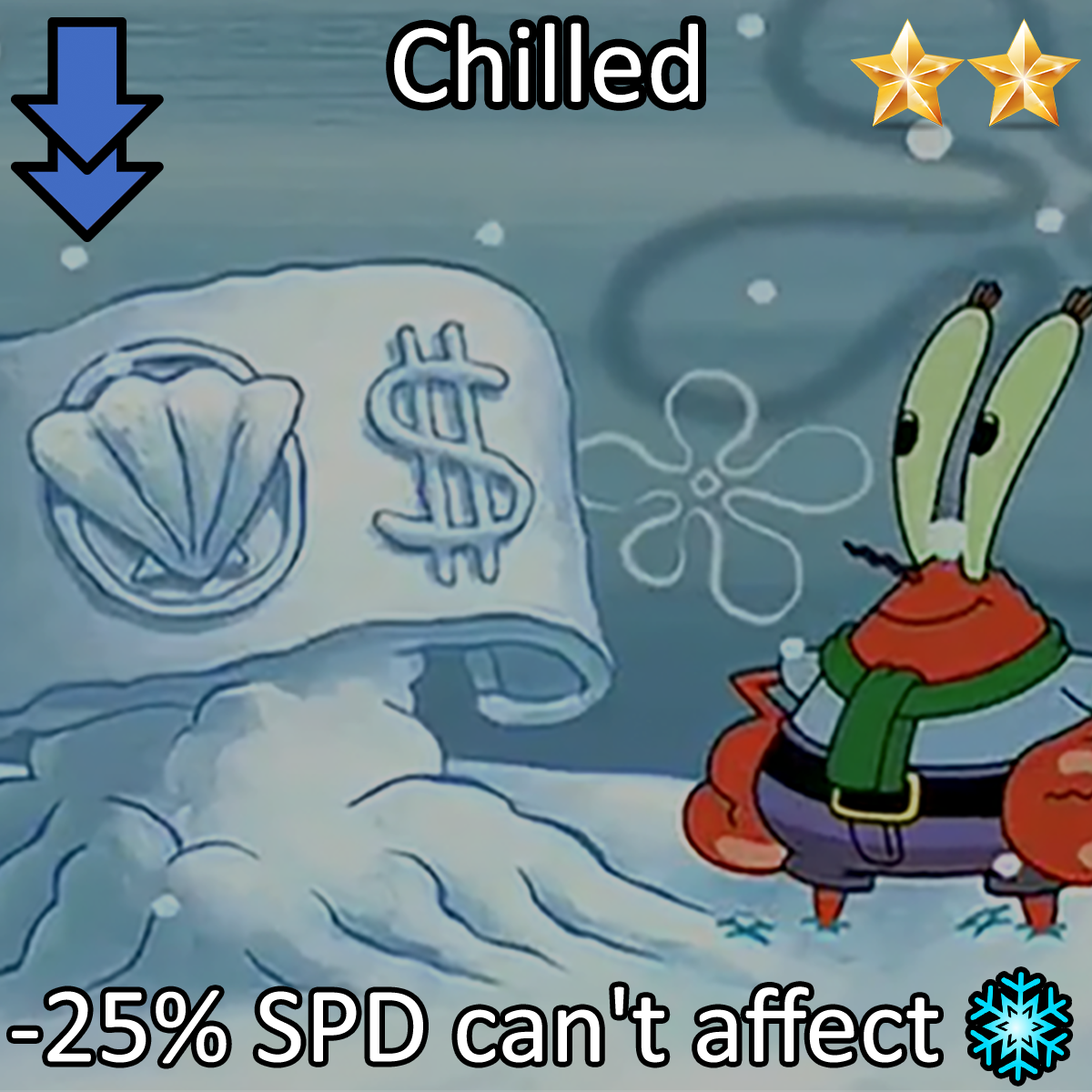
<style>
.page{position:relative;width:1092px;height:1092px}
.page>*{position:absolute;margin:0}
.t1{font:196.6px "Calibri";color:#ffffff}
.t2{font:186.9px "Calibri";color:#ffffff}
.t3{font:186.9px "stoogedings-Regular";color:#ffffff}
</style>
<div class="page">
<p class="t1" style="left:394px;top:23px;width:304px;height:80px">Chilled</p>
<p class="t2" style="left:12px;top:972px;width:1056px;height:109px">-25% SPD can't affect <span class="t3">[ice]</span></p>
</div>
